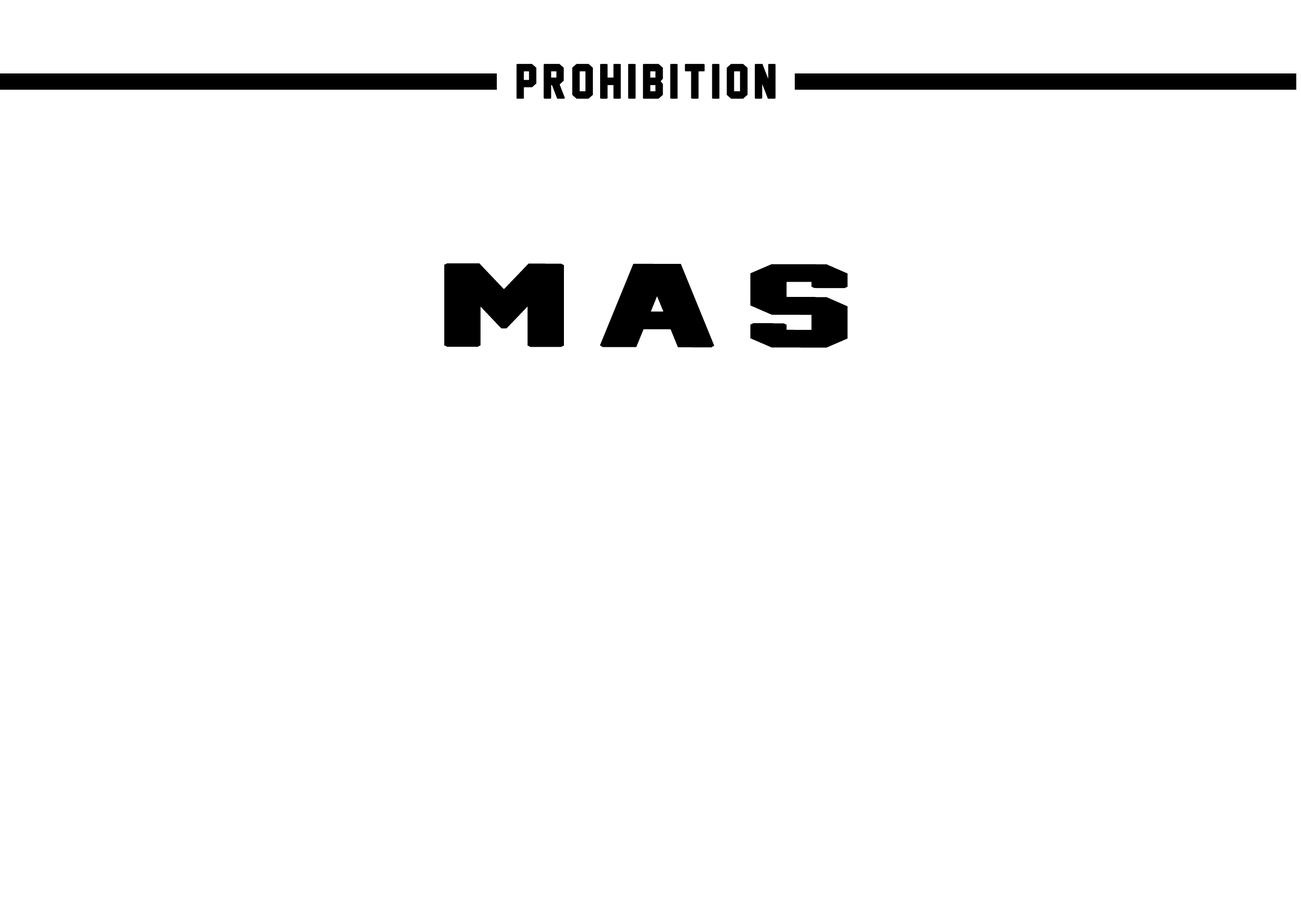
<style>
.page{position:relative;width:1301px;height:917px;background:#ffffff}
.page>*{position:absolute;margin:0}
.t1{font:43.7px "JerseyM54";letter-spacing:0.1em;color:#000000;font-weight:bold}
.t2{font:104.9px "JerseyM54";letter-spacing:0.1em;color:#000000;font-weight:bold;scale:2.04 1}
</style>
<div class="page">
<p class="t1" style="left:516px;top:63px;width:260px;height:36px">prohibition</p>
<p class="t2" style="left:444px;top:263px;width:404px;height:85px">Mas</p>
</div>
